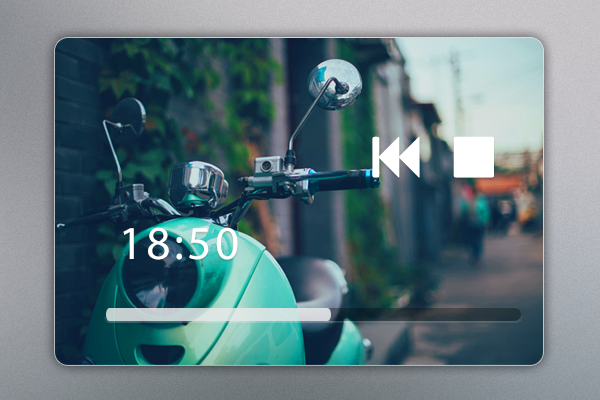
<style>
.page{position:relative;width:600px;height:400px}
.page>*{position:absolute;margin:0}
.t1{font:47.1px "MyriadPro-Regular";letter-spacing:0.075em;color:#ffffff}
</style>
<div class="page">
<p class="t1" style="left:123px;top:227px;width:115px;height:33px">18:50</p>
</div>
